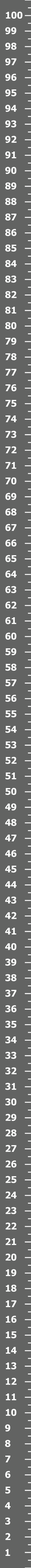
<style>
.page{position:relative;width:31px;height:1568px;background:#626362}
.page>*{position:absolute;margin:0}
.t1{font:9.3px "Tahoma-Bold";color:#fdfefd}
</style>
<div class="page">
<p class="t1" style="left:6px;top:11px;width:17px;height:8px">100</p>
<p class="t1" style="left:5px;top:27px;width:11px;height:7px">99</p>
<p class="t1" style="left:5px;top:43px;width:11px;height:7px">98</p>
<p class="t1" style="left:5px;top:58px;width:11px;height:8px">97</p>
<p class="t1" style="left:5px;top:74px;width:11px;height:7px">96</p>
<p class="t1" style="left:5px;top:89px;width:11px;height:8px">95</p>
<p class="t1" style="left:5px;top:105px;width:12px;height:7px">94</p>
<p class="t1" style="left:5px;top:120px;width:11px;height:8px">93</p>
<p class="t1" style="left:5px;top:136px;width:12px;height:7px">92</p>
<p class="t1" style="left:5px;top:151px;width:11px;height:8px">91</p>
<p class="t1" style="left:5px;top:167px;width:11px;height:7px">90</p>
<p class="t1" style="left:5px;top:182px;width:11px;height:8px">89</p>
<p class="t1" style="left:5px;top:198px;width:11px;height:7px">88</p>
<p class="t1" style="left:5px;top:213px;width:11px;height:8px">87</p>
<p class="t1" style="left:5px;top:229px;width:11px;height:7px">86</p>
<p class="t1" style="left:5px;top:244px;width:11px;height:8px">85</p>
<p class="t1" style="left:5px;top:260px;width:12px;height:7px">84</p>
<p class="t1" style="left:5px;top:275px;width:11px;height:8px">83</p>
<p class="t1" style="left:5px;top:291px;width:12px;height:7px">82</p>
<p class="t1" style="left:5px;top:306px;width:11px;height:8px">81</p>
<p class="t1" style="left:5px;top:322px;width:11px;height:7px">80</p>
<p class="t1" style="left:5px;top:338px;width:11px;height:7px">79</p>
<p class="t1" style="left:5px;top:353px;width:11px;height:7px">78</p>
<p class="t1" style="left:5px;top:369px;width:11px;height:7px">77</p>
<p class="t1" style="left:5px;top:384px;width:11px;height:8px">76</p>
<p class="t1" style="left:5px;top:400px;width:11px;height:7px">75</p>
<p class="t1" style="left:5px;top:415px;width:12px;height:7px">74</p>
<p class="t1" style="left:5px;top:431px;width:11px;height:7px">73</p>
<p class="t1" style="left:5px;top:446px;width:12px;height:7px">72</p>
<p class="t1" style="left:5px;top:462px;width:11px;height:7px">71</p>
<p class="t1" style="left:5px;top:477px;width:11px;height:8px">70</p>
<p class="t1" style="left:5px;top:493px;width:11px;height:7px">69</p>
<p class="t1" style="left:5px;top:508px;width:11px;height:8px">68</p>
<p class="t1" style="left:5px;top:524px;width:11px;height:7px">67</p>
<p class="t1" style="left:5px;top:539px;width:11px;height:8px">66</p>
<p class="t1" style="left:5px;top:555px;width:11px;height:7px">65</p>
<p class="t1" style="left:5px;top:570px;width:12px;height:8px">64</p>
<p class="t1" style="left:5px;top:586px;width:11px;height:7px">63</p>
<p class="t1" style="left:5px;top:601px;width:12px;height:8px">62</p>
<p class="t1" style="left:5px;top:617px;width:11px;height:7px">61</p>
<p class="t1" style="left:5px;top:632px;width:11px;height:8px">60</p>
<p class="t1" style="left:5px;top:648px;width:11px;height:7px">59</p>
<p class="t1" style="left:5px;top:664px;width:11px;height:7px">58</p>
<p class="t1" style="left:5px;top:679px;width:11px;height:8px">57</p>
<p class="t1" style="left:5px;top:695px;width:11px;height:7px">56</p>
<p class="t1" style="left:5px;top:710px;width:11px;height:8px">55</p>
<p class="t1" style="left:5px;top:726px;width:12px;height:7px">54</p>
<p class="t1" style="left:5px;top:741px;width:11px;height:8px">53</p>
<p class="t1" style="left:5px;top:757px;width:12px;height:7px">52</p>
<p class="t1" style="left:5px;top:773px;width:11px;height:7px">51</p>
<p class="t1" style="left:5px;top:788px;width:11px;height:7px">50</p>
<p class="t1" style="left:5px;top:803px;width:11px;height:8px">49</p>
<p class="t1" style="left:5px;top:819px;width:11px;height:7px">48</p>
<p class="t1" style="left:5px;top:835px;width:11px;height:6px">47</p>
<p class="t1" style="left:5px;top:850px;width:11px;height:7px">46</p>
<p class="t1" style="left:5px;top:866px;width:11px;height:7px">45</p>
<p class="t1" style="left:5px;top:881px;width:12px;height:7px">44</p>
<p class="t1" style="left:5px;top:896px;width:11px;height:8px">43</p>
<p class="t1" style="left:5px;top:912px;width:12px;height:7px">42</p>
<p class="t1" style="left:5px;top:928px;width:11px;height:7px">41</p>
<p class="t1" style="left:5px;top:943px;width:11px;height:7px">40</p>
<p class="t1" style="left:5px;top:958px;width:11px;height:8px">39</p>
<p class="t1" style="left:5px;top:974px;width:11px;height:7px">38</p>
<p class="t1" style="left:5px;top:990px;width:11px;height:7px">37</p>
<p class="t1" style="left:5px;top:1005px;width:11px;height:8px">36</p>
<p class="t1" style="left:5px;top:1021px;width:11px;height:7px">35</p>
<p class="t1" style="left:5px;top:1036px;width:12px;height:8px">34</p>
<p class="t1" style="left:5px;top:1052px;width:11px;height:7px">33</p>
<p class="t1" style="left:5px;top:1067px;width:12px;height:8px">32</p>
<p class="t1" style="left:5px;top:1083px;width:11px;height:7px">31</p>
<p class="t1" style="left:5px;top:1098px;width:11px;height:8px">30</p>
<p class="t1" style="left:6px;top:1114px;width:10px;height:7px">29</p>
<p class="t1" style="left:6px;top:1129px;width:10px;height:8px">28</p>
<p class="t1" style="left:6px;top:1145px;width:10px;height:7px">27</p>
<p class="t1" style="left:6px;top:1160px;width:10px;height:8px">26</p>
<p class="t1" style="left:6px;top:1176px;width:10px;height:7px">25</p>
<p class="t1" style="left:6px;top:1191px;width:11px;height:8px">24</p>
<p class="t1" style="left:6px;top:1207px;width:10px;height:7px">23</p>
<p class="t1" style="left:6px;top:1222px;width:11px;height:8px">22</p>
<p class="t1" style="left:6px;top:1238px;width:10px;height:7px">21</p>
<p class="t1" style="left:6px;top:1253px;width:10px;height:8px">20</p>
</div>
